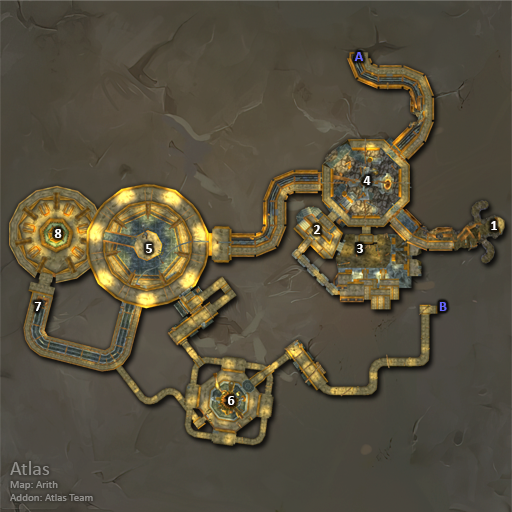
<style>
.page{position:relative;width:512px;height:512px}
.page>*{position:absolute;margin:0}
.t1{font:14px "Calibri-Bold";color:#6666ff}
.t2{font:14px "Calibri-Bold";color:#ffffff}
.t3{font:11px "Calibri";color:#91908d}
.t4{font:20px "Calibri";color:#91908d}
</style>
<div class="page">
<p class="t1" style="left:354px;top:52px;width:9px;height:9px">A</p>
<p class="t2" style="left:363px;top:176px;width:8px;height:9px">4</p>
<p class="t2" style="left:491px;top:221px;width:6px;height:9px">1</p>
<p class="t2" style="left:54px;top:229px;width:8px;height:9px">8</p>
<p class="t2" style="left:314px;top:225px;width:7px;height:9px">2</p>
<p class="t2" style="left:146px;top:244px;width:6px;height:9px">5</p>
<p class="t2" style="left:357px;top:244px;width:6px;height:9px">3</p>
<p class="t2" style="left:34px;top:302px;width:8px;height:9px">7</p>
<p class="t1" style="left:439px;top:302px;width:8px;height:9px">B</p>
<p class="t2" style="left:228px;top:396px;width:7px;height:9px">6</p>
<p class="t3" style="left:10px;top:461px;width:83px;height:40px"><span class="t4">Atlas<br></span>Map: Arith<br>Addon: Atlas Team</p>
</div>
